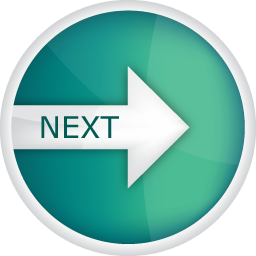
<style>
.page{position:relative;width:256px;height:256px;background:#ffffff}
.page>*{position:absolute;margin:0}
.t1{font:30px "Verdana";color:#035a52}
</style>
<div class="page">
<p class="t1" style="left:41px;top:116px;width:78px;height:22px">NEXT</p>
</div>
